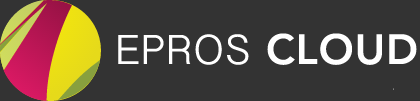
<style>
.page{position:relative;width:420px;height:101px;background:#333333}
.page>*{position:absolute;margin:0}
.t1{font:42px "GujaratiSangamMN";letter-spacing:0.025em;color:#ffffff}
.t2{font:42px "Avenir-Heavy";letter-spacing:0.025em;color:#ffffff}
</style>
<div class="page">
<p class="t1" style="left:118px;top:34px;width:131px;height:31px">EPROS</p>
<p class="t2" style="left:267px;top:33px;width:150px;height:32px">CLOUD</p>
</div>
